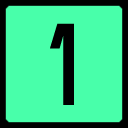
<style>
.page{position:relative;width:128px;height:128px;background:#48ffaa}
.page>*{position:absolute;margin:0}
.t1{font:121.2px "NesobriteCd-Bold";letter-spacing:-0.025em;color:#000000}
</style>
<div class="page">
<p class="t1" style="left:50px;top:23px;width:24px;height:82px">1</p>
</div>
